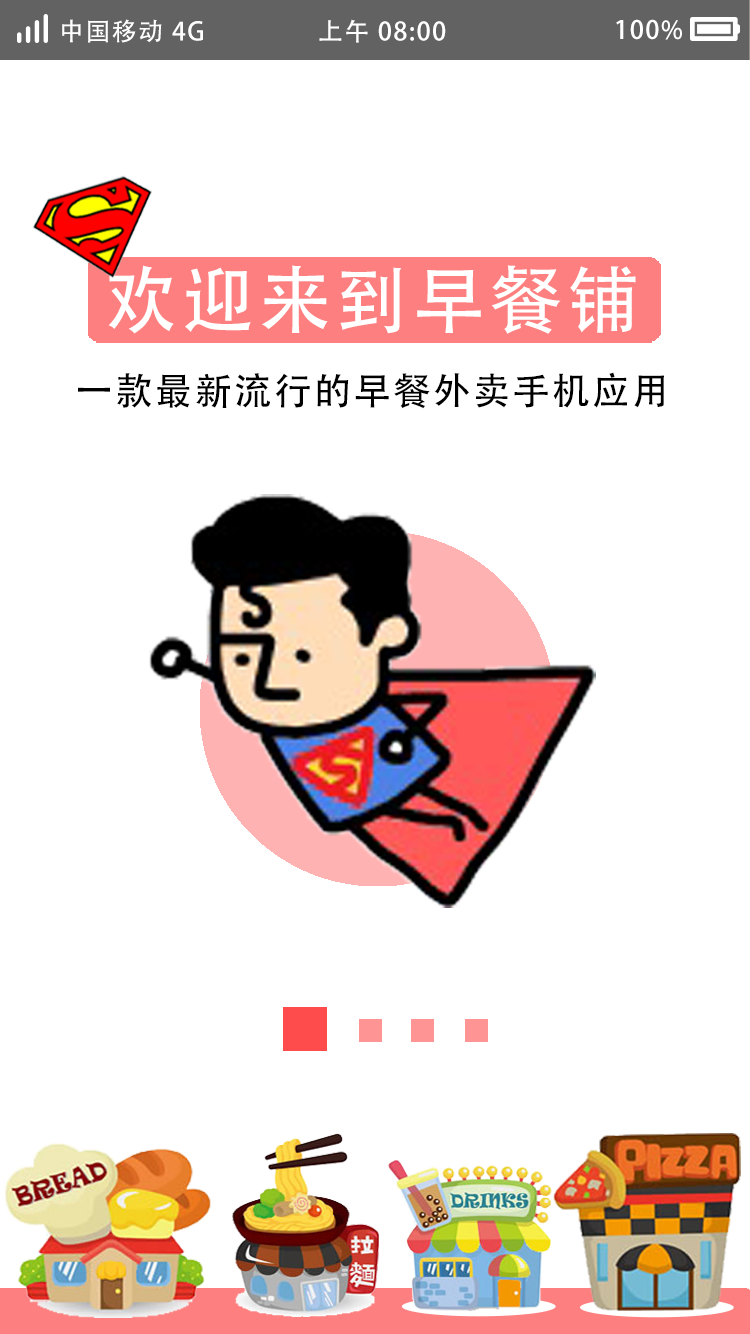
<style>
.page{position:relative;width:750px;height:1334px;background:#ffffff}
.page>*{position:absolute;margin:0}
.t1{font:25px "AdobeHeitiStd-Regular";letter-spacing:0.06em;color:#ffffff}
.t2{font:73px "AdobeHeitiStd-Regular";letter-spacing:0.06em;color:#ffffff}
.t3{font:37.5px "AdobeHeitiStd-Regular";letter-spacing:0.06em;color:#000000}
</style>
<div class="page">
<p class="t1" style="left:62px;top:19px;width:141px;height:24px">中国移动 4G</p>
<p class="t1" style="left:319px;top:19px;width:127px;height:24px">上午 08:00</p>
<p class="t1" style="left:616px;top:19px;width:66px;height:21px">100%</p>
<p class="t2" style="left:108px;top:265px;width:528px;height:69px">欢迎来到早餐铺</p>
<p class="t3" style="left:78px;top:372px;width:586px;height:37px">一款最新流行的早餐外卖手机应用</p>
</div>
